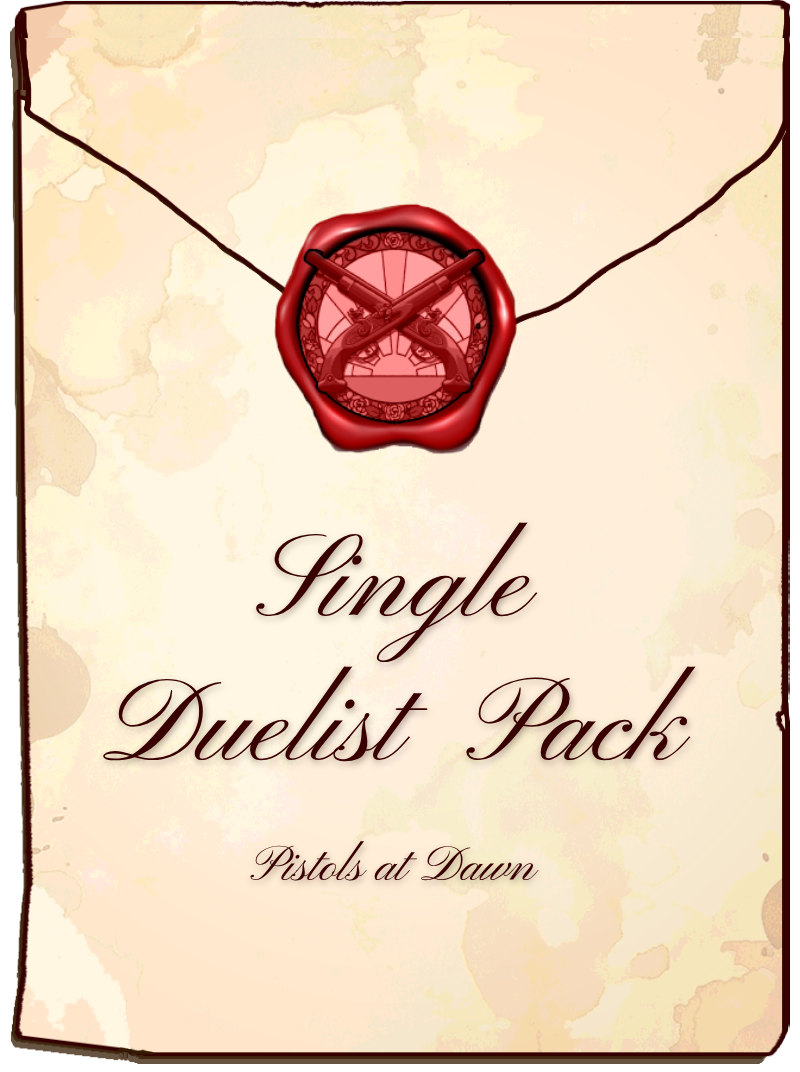
<style>
.page{position:relative;width:800px;height:1072px}
.page>*{position:absolute;margin:0}
.t1{font:120px "PinyonScript-Regular";color:#390000}
.t2{font:50px "PinyonScript-Regular";color:#390000}
</style>
<div class="page">
<p class="t1" style="left:103px;top:522px;width:593px;height:359px;text-align:center">Single<br>Duelist  Pack<br><span class="t2"><br>Pistols at Dawn</span></p>
</div>
